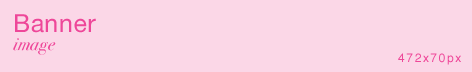
<style>
.page{position:relative;width:472px;height:72px;background:#fbd7e7}
.page>*{position:absolute;margin:0}
.t1{font:25px/18px "HelveticaNeue";letter-spacing:0.025em;color:#ee4799}
.t2{font:18px/18px "BodoniSvtyTwoOSITCTTBookIt";letter-spacing:0.025em;color:#ee4799}
.t3{font:12px "Helvetica";letter-spacing:0.11em;color:#ee4799}
</style>
<div class="page">
<p class="t1" style="left:13px;top:14px;width:83px;height:41px">Banner<br><span class="t2">image</span></p>
<p class="t3" style="left:398px;top:53px;width:63px;height:12px">472x70px</p>
</div>
